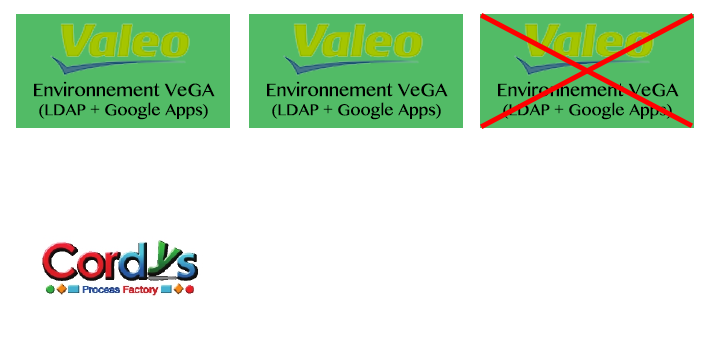
<style>
.page{position:relative;width:709px;height:340px;background:#ffffff}
.page>*{position:absolute;margin:0}
.t1{font:16px "BanglaMN";color:#000000}
.t2{font:18px "BanglaMN";color:#000000}
</style>
<div class="page">
<p class="t1" style="left:34px;top:81px;width:181px;height:39px;text-align:center"><span class="t2">Environnement VeGA<br></span>(LDAP + Google Apps)</p>
<p class="t1" style="left:267px;top:81px;width:181px;height:39px;text-align:center"><span class="t2">Environnement VeGA<br></span>(LDAP + Google Apps)</p>
<p class="t1" style="left:498px;top:81px;width:181px;height:39px;text-align:center"><span class="t2">Environnement VeGA<br></span>(LDAP + Google Apps)</p>
</div>
